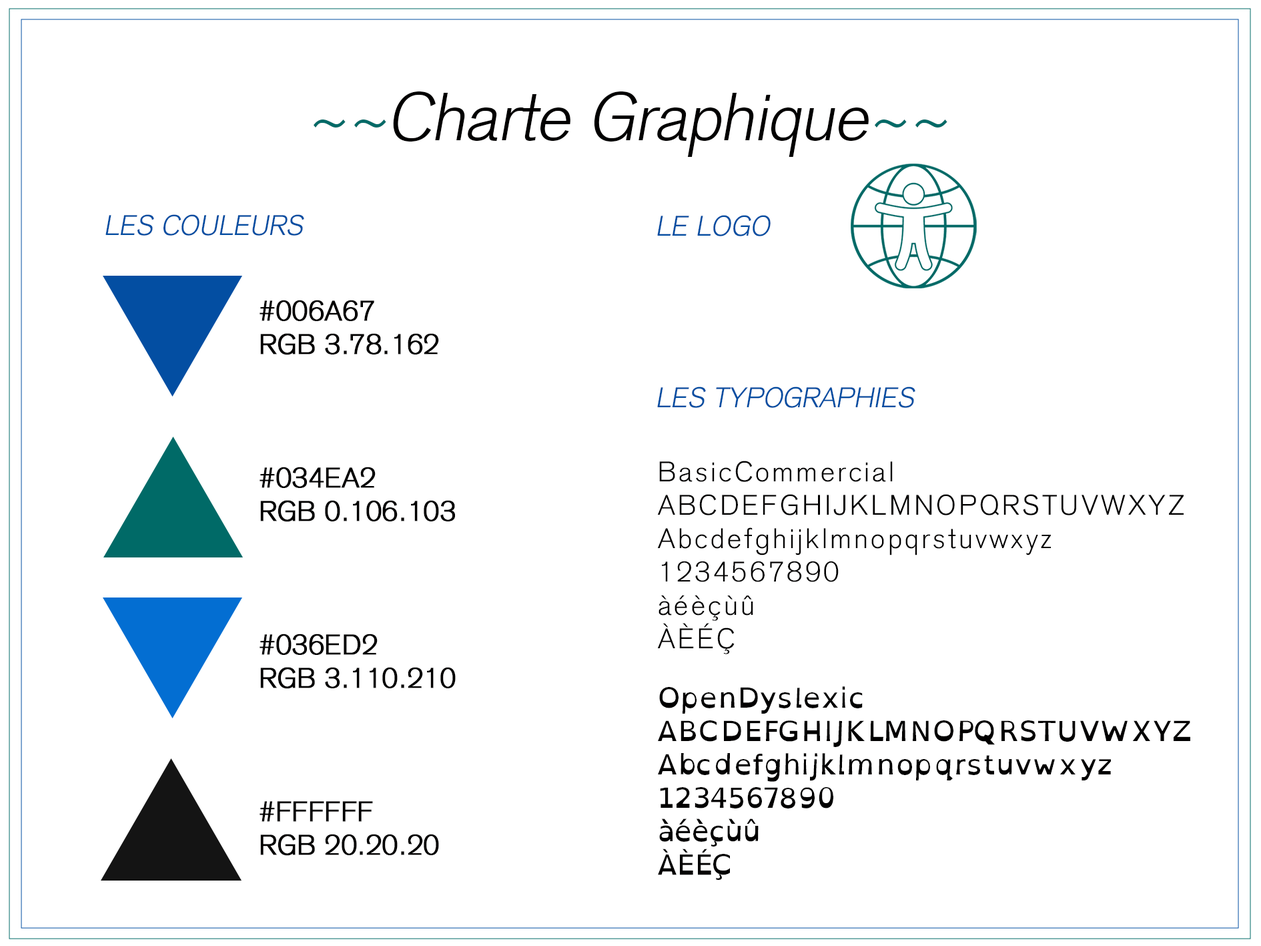
<style>
.page{position:relative;width:1261px;height:946px;background:#ffffff}
.page>*{position:absolute;margin:0}
.t1{font:66.7px "BasicCommercialLTW04-Light";color:#010000;font-style:italic}
.t2{font:66.7px "BasicCommercialLTW04-Light";color:#006a67;font-style:italic}
.t3{font:27.8px "BasicCommercialLTW04-Light";color:#034ea2;font-style:italic}
.t4{font:27.8px "BasicCommercialLTW04-Light";color:#010000;font-weight:bold}
.t5{font:27.8px "BasicCommercialLTW04-Light";letter-spacing:0.1em;color:#010000}
.t6{font:27.8px "OpenDyslexic-Regular";color:#010000}
</style>
<div class="page">
<p class="t1" style="left:314px;top:91px;width:634px;height:66px"><span class="t2">~~</span>Charte Graphique<span class="t2">~~</span></p>
<p class="t3" style="left:105px;top:214px;width:199px;height:22px">LES COULEURS</p>
<p class="t3" style="left:657px;top:215px;width:114px;height:21px">LE LOGO</p>
<p class="t4" style="left:260px;top:300px;width:196px;height:555px">#006A67<br>RGB 3.78.162<br><br><br><br>#034EA2<br>RGB 0.106.103<br><br><br><br>#036ED2<br>RGB 3.110.210<br><br><br><br>#FFFFFF<br>RGB 20.20.20</p>
<p class="t3" style="left:657px;top:386px;width:258px;height:22px">LES TYPOGRAPHIES</p>
<p class="t5" style="left:657px;top:460px;width:527px;height:194px">BasicCommercial<br>ABCDEFGHIJKLMNOPQRSTUVWXYZ<br>Abcdefghijklmnopqrstuvwxyz<br>1234567890<br>àéèçùû <br>ÀÈÉÇ</p>
<p class="t6" style="left:658px;top:686px;width:532px;height:193px">OpenDyslexic<br>ABCDEFGHIJKLMNOPQRSTUVWXYZ<br>Abcdefghijklmnopqrstuvwxyz<br>1234567890<br>àéèçùû<br>ÀÈÉÇ</p>
</div>
